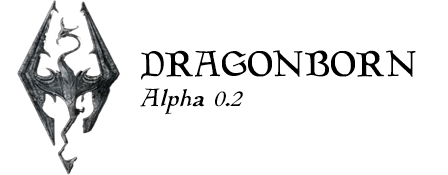
<style>
.page{position:relative;width:448px;height:175px;background:#ffffff}
.page>*{position:absolute;margin:0}
.t1{font:36px "Planewalker";color:#000000}
.t2{font:25px "Planewalker-Italic";color:#000000}
</style>
<div class="page">
<p class="t1" style="left:140px;top:50px;width:276px;height:65px">DRAGONBORN<br><span class="t2">Alpha 0.2</span></p>
</div>
